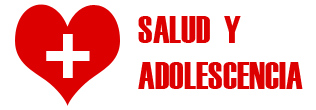
<style>
.page{position:relative;width:316px;height:110px;background:#ffffff}
.page>*{position:absolute;margin:0}
.t1{font:38px "Haettenschweiler";color:#dc0000}
.t2{font:123px "Haettenschweiler";color:#ffffff}
</style>
<div class="page">
<p class="t1" style="left:138px;top:16px;width:165px;height:73px">SALUD  Y <br>ADOLESCENCIA</p>
<p class="t2" style="left:46px;top:34px;width:44px;height:44px">+</p>
</div>
